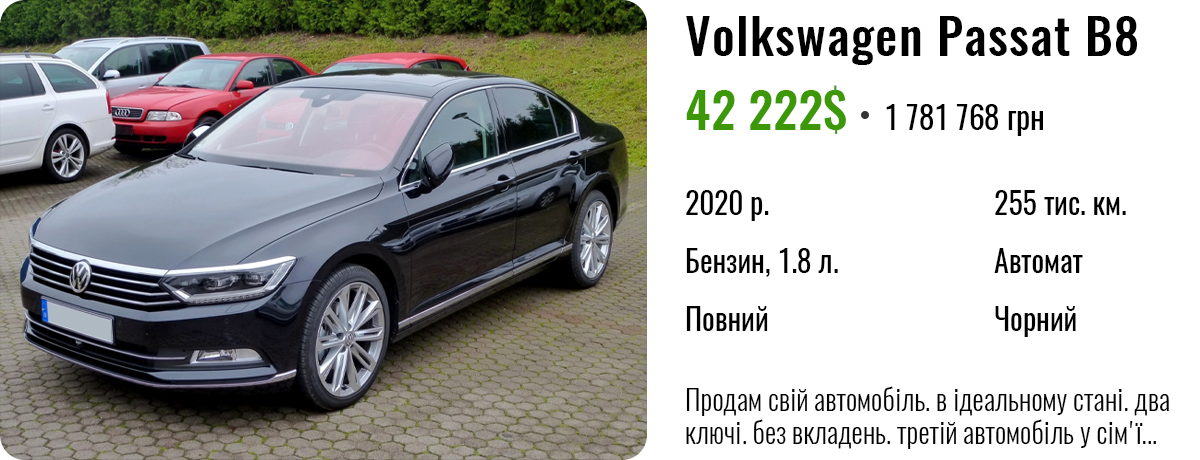
<style>
.page{position:relative;width:1200px;height:460px;background:#ffffff}
.page>*{position:absolute;margin:0}
.t1{font:50px "Oswald-Medium";letter-spacing:0.025em;color:#000000}
.t2{font:50px "Oswald-Medium";color:#3c9806}
.t3{font:32px "Oswald-Regular";color:#000000}
.t4{font:30px/58px "Oswald-Regular";color:#000000}
.t5{font:28px "Oswald-Light";color:#000000}
</style>
<div class="page">
<p class="t1" style="left:686px;top:16px;width:451px;height:49px">Volkswagen Passat B8</p>
<p class="t2" style="left:686px;top:85px;width:160px;height:49px">42 222$</p>
<p class="t3" style="left:886px;top:104px;width:157px;height:32px">1 781 768 грн</p>
<p class="t4" style="left:686px;top:190px;width:152px;height:141px">2020 р.<br>Бензин, 1.8 л.<br>Повний</p>
<p class="t4" style="left:994px;top:190px;width:132px;height:147px">255 тис. км.<br>Автомат<br>Чорний</p>
<p class="t5" style="left:686px;top:386px;width:483px;height:63px">Продам свій автомобіль. в ідеальному стані. два ключі. без вкладень. третій автомобіль у сім'ї...</p>
</div>
